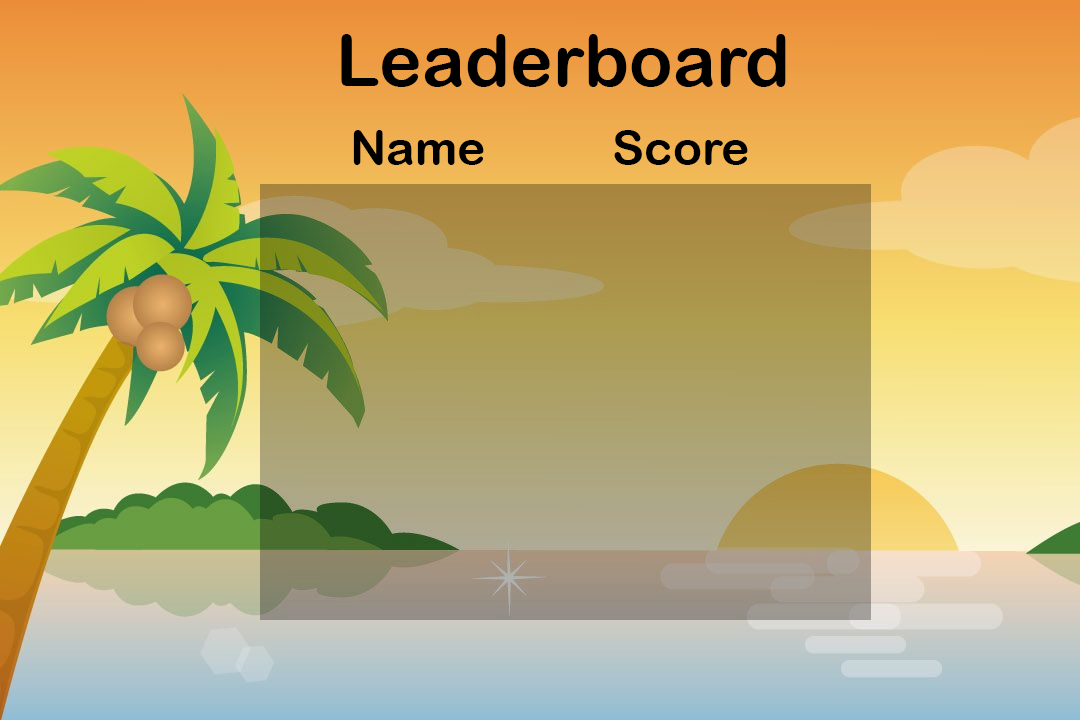
<style>
.page{position:relative;width:1080px;height:720px}
.page>*{position:absolute;margin:0}
.t1{font:72px "ArialRoundedMTBold";color:#000000}
.t2{font:48px "ArialRoundedMTBold";color:#000000}
</style>
<div class="page">
<p class="t1" style="left:341px;top:34px;width:445px;height:53px">Leaderboard</p>
<p class="t2" style="left:353px;top:130px;width:131px;height:35px">Name</p>
<p class="t2" style="left:614px;top:130px;width:134px;height:35px">Score</p>
</div>
